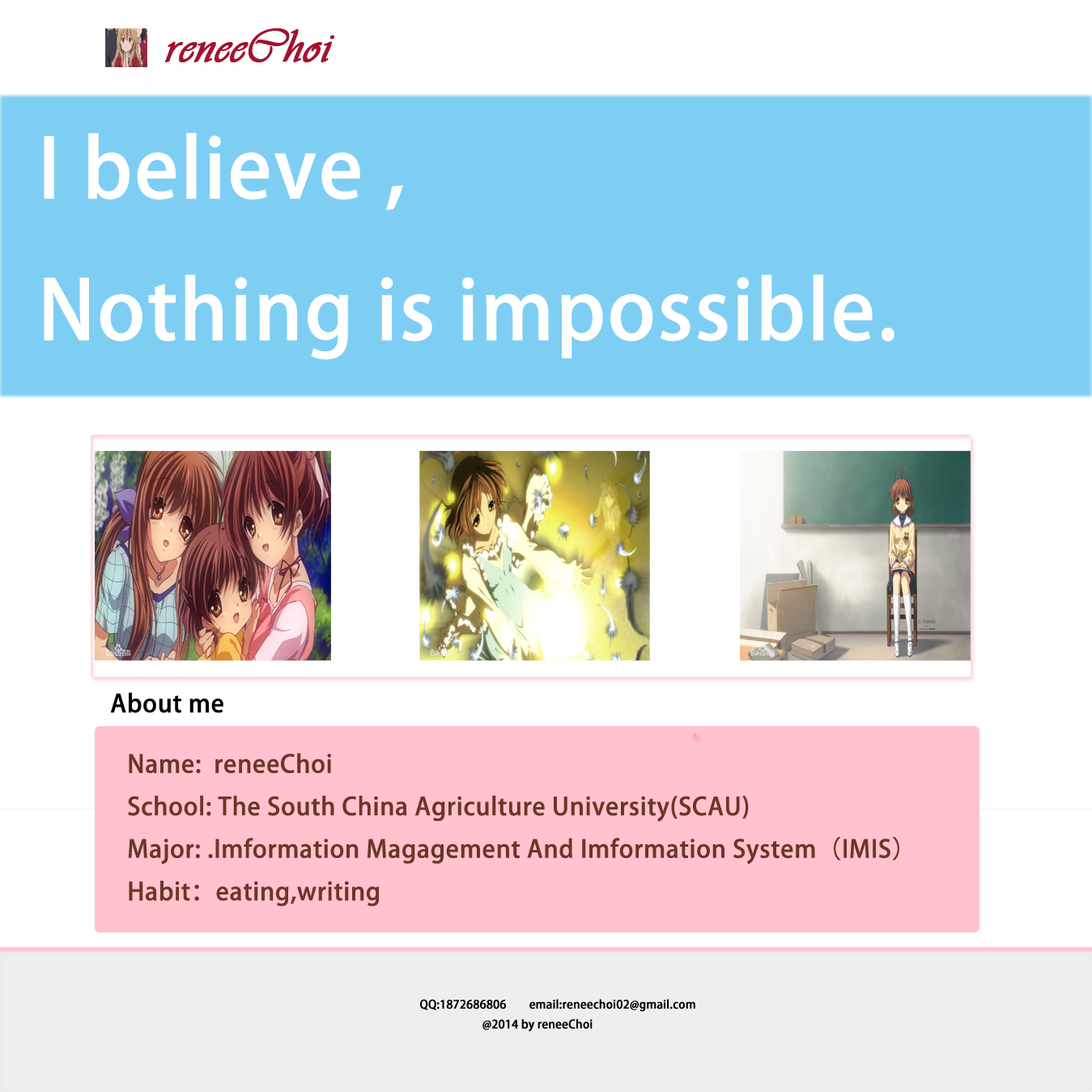
<style>
.page{position:relative;width:1092px;height:1092px;background:#ffffff}
.page>*{position:absolute;margin:0}
.t1{font:48.6px "Vivaldii";color:#a2122f;font-weight:bold}
.t2{font:80.9px "AdobeHeitiStd-Regular";color:#ffffff;font-weight:bold}
.t3{font:24.3px "AdobeHeitiStd-Regular";color:#000000;font-weight:bold}
.t4{font:24.3px "AdobeHeitiStd-Regular";color:#693726;font-weight:bold}
.t5{font:11.3px "AdobeHeitiStd-Regular";color:#010101;font-weight:bold}
</style>
<div class="page">
<p class="t1" style="left:165px;top:28px;width:169px;height:34px">reneeChoi</p>
<p class="t2" style="left:44px;top:133px;width:850px;height:226px">I believe ,<br>Nothing is impossible.</p>
<p class="t3" style="left:111px;top:692px;width:112px;height:21px">About me</p>
<p class="t4" style="left:128px;top:753px;width:771px;height:154px">Name:  reneeChoi<br>School: The South China Agriculture University(SCAU)<br>Major: .Imformation Magagement And Imformation System（IMIS）<br>Habit：eating,writing</p>
<p class="t5" style="left:420px;top:999px;width:275px;height:32px">QQ:1872686806        email:reneechoi02@gmail.com<br>                      @2014 by reneeChoi</p>
</div>
